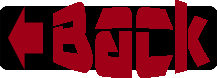
<style>
.page{position:relative;width:217px;height:78px;background:#9f0017}
.page>*{position:absolute;margin:0}
.t1{font:72px "ARDESTINE";color:#9f0017}
</style>
<div class="page">
<p class="t1" style="left:53px;top:0px;width:157px;height:78px">Back</p>
</div>
